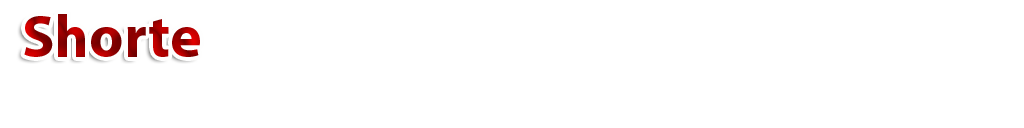
<style>
.page{position:relative;width:1024px;height:128px;background:#ffffff}
.page>*{position:absolute;margin:0}
.t1{font:60px "MyriadPro-Bold"}
</style>
<div class="page">
<p class="t1" style="left:24px;top:14px;width:176px;height:43px">Shorte</p>
</div>
